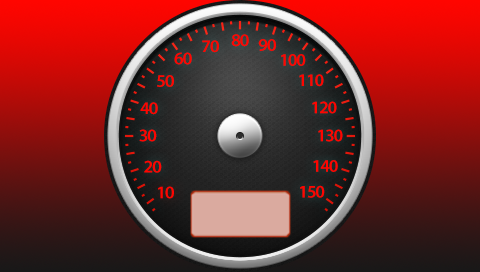
<style>
.page{position:relative;width:480px;height:272px}
.page>*{position:absolute;margin:0}
.t1{font:17.5px "MyriadPro-Semibold";letter-spacing:-0.04em;color:#ff0600}
.t2{font:17.5px "MyriadPro-Semibold";letter-spacing:-0.04em;color:#ff0700}
</style>
<div class="page">
<p class="t1" style="left:202px;top:40px;width:17px;height:13px">70</p>
<p class="t1" style="left:231px;top:34px;width:18px;height:13px">80</p>
<p class="t2" style="left:258px;top:39px;width:18px;height:12px">90</p>
<p class="t1" style="left:174px;top:52px;width:18px;height:13px">60</p>
<p class="t1" style="left:281px;top:54px;width:25px;height:12px">100</p>
<p class="t2" style="left:157px;top:75px;width:17px;height:12px">50</p>
<p class="t1" style="left:299px;top:74px;width:25px;height:13px">110</p>
<p class="t1" style="left:140px;top:102px;width:18px;height:13px">40</p>
<p class="t1" style="left:312px;top:101px;width:25px;height:13px">120</p>
<p class="t1" style="left:139px;top:129px;width:18px;height:13px">30</p>
<p class="t1" style="left:318px;top:129px;width:25px;height:13px">130</p>
<p class="t1" style="left:144px;top:160px;width:18px;height:13px">20</p>
<p class="t1" style="left:313px;top:160px;width:25px;height:12px">140</p>
<p class="t1" style="left:300px;top:185px;width:25px;height:13px">150</p>
<p class="t1" style="left:158px;top:186px;width:16px;height:13px">10</p>
</div>
